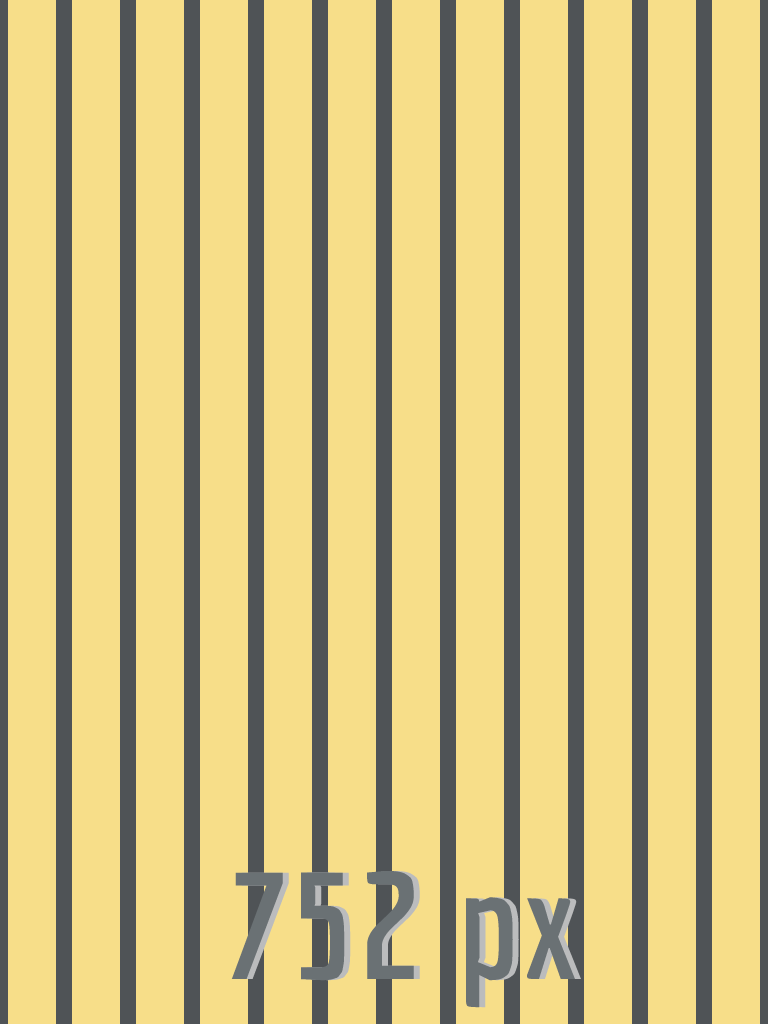
<style>
.page{position:relative;width:768px;height:1024px;background:#f7de89}
.page>*{position:absolute;margin:0}
.t1{font:150px "Economica-Bold";letter-spacing:0.03em;color:#6a7174}
.t2{font:150px "Economica-Bold";letter-spacing:0.03em}
</style>
<div class="page">
<p class="t1" style="left:231px;top:871px;width:344px;height:137px">752 px</p>
<p class="t2" style="left:237px;top:871px;width:344px;height:137px">752 px</p>
</div>
